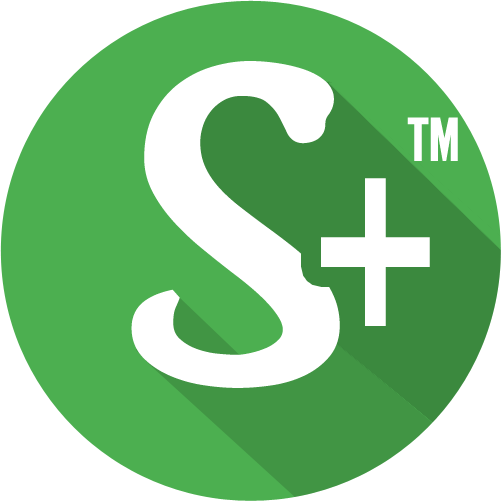
<style>
.page{position:relative;width:501px;height:501px;background:#ffffff}
.page>*{position:absolute;margin:0}
.t1{font:450px "Billabong";color:#ffffff;font-weight:bold}
.t2{font:130px "LeagueGothic-Regular";color:#ffffff}
.t3{font:350px "LeagueGothic-Regular";color:#ffffff;scale:0.7 1}
</style>
<div class="page">
<p class="t1" style="left:131px;top:61px;width:209px;height:327px">S</p>
<p class="t2" style="left:407px;top:117px;width:51px;height:44px">™</p>
<p class="t3" style="left:321px;top:178px;width:109px;height:148px">+</p>
</div>
